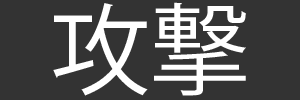
<style>
.page{position:relative;width:300px;height:100px;background:#333333}
.page>*{position:absolute;margin:0}
.t1{font:100px "KozGoPr6N-Regular";color:#ffffff}
</style>
<div class="page">
<p class="t1" style="left:53px;top:2px;width:193px;height:94px">攻撃</p>
</div>
